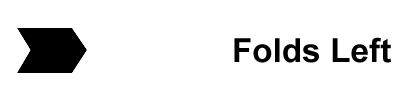
<style>
.page{position:relative;width:400px;height:100px;background:#ffffff}
.page>*{position:absolute;margin:0}
.t1{font:33.3px "Arial-BoldMT";color:#000000}
</style>
<div class="page">
<p class="t1" style="left:234px;top:37px;width:157px;height:26px">Folds Left</p>
</div>
